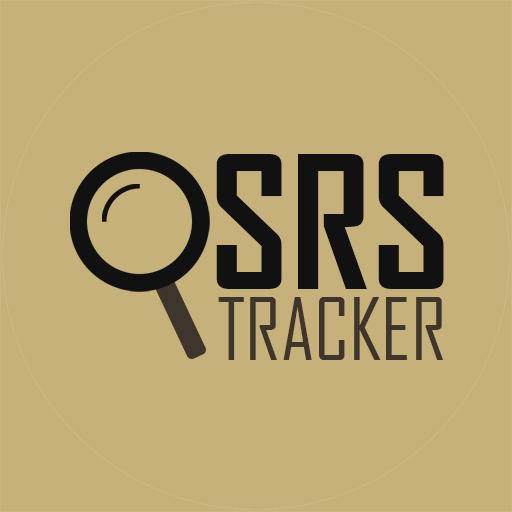
<style>
.page{position:relative;width:512px;height:512px;background:#c6b17a}
.page>*{position:absolute;margin:0}
.t1{font:176px "AgencyFB-Bold";color:#000000}
.t2{font:83px "AgencyFB-Reg";color:#3e362c}
</style>
<div class="page">
<p class="t1" style="left:216px;top:154px;width:228px;height:135px">SRS</p>
<p class="t2" style="left:218px;top:297px;width:225px;height:63px">TRACKER</p>
</div>
